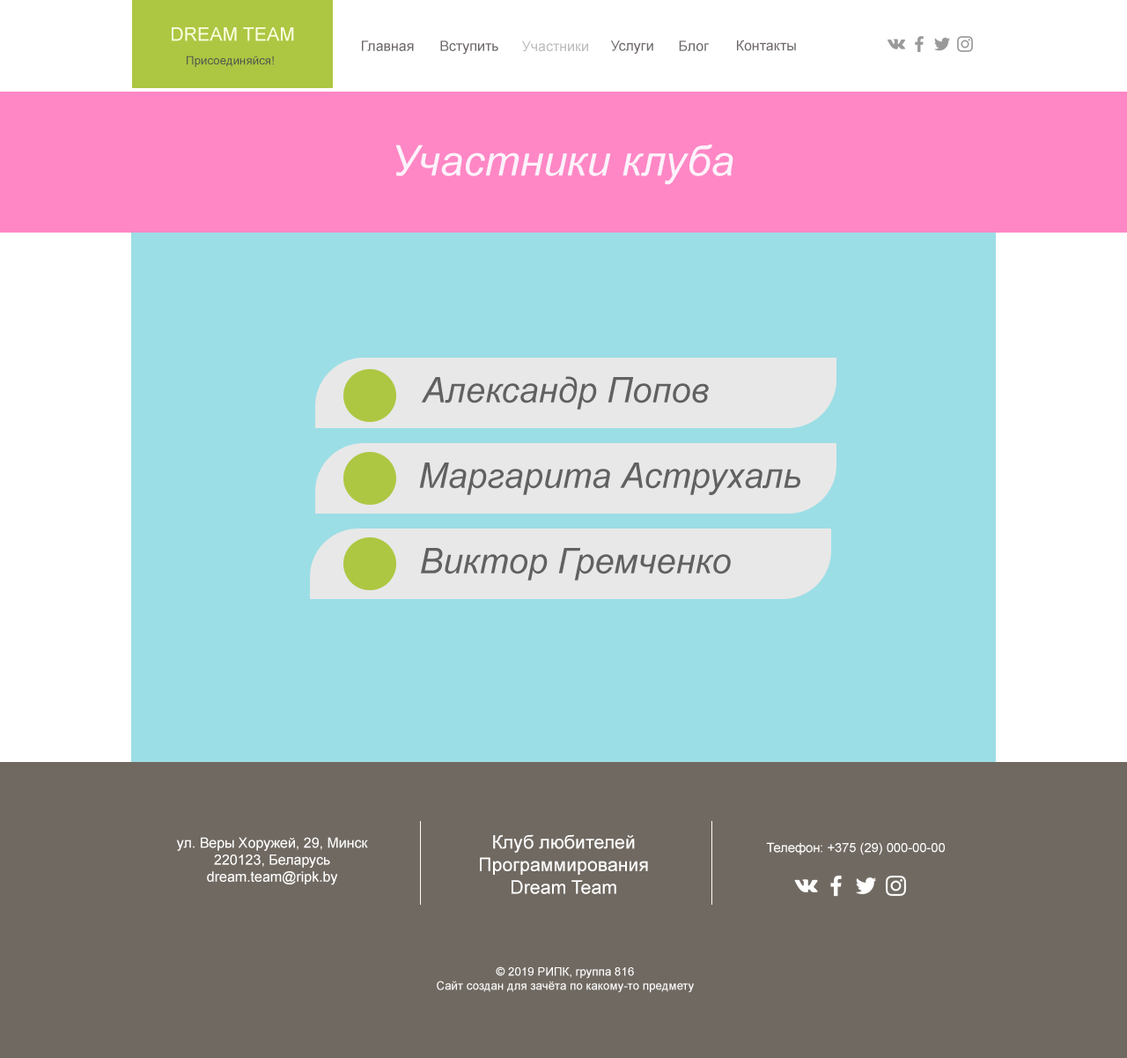
<style>
.page{position:relative;width:1127px;height:1058px;background:#9cdee6}
.page>*{position:absolute;margin:0}
.t1{font:18.8px "ArialMT";color:#fcffdf}
.t2{font:14.1px "ArialMT";color:#6d6666}
.t3{font:14.1px "ArialMT";color:#bdbdbd}
.t4{font:11.7px "ArialMT";color:#53554b}
.t5{font:42.3px "Arial-ItalicMT";color:#fdf2fb}
.t6{font:35.2px "Arial-ItalicMT";color:#616161}
.t7{font:14.1px "ArialMT";color:#ffffff}
.t8{font:18.8px "ArialMT";color:#ffffff}
.t9{font:12.9px "ArialMT";color:#ffffff}
.t10{font:11.7px "ArialMT";color:#ffffff}
</style>
<div class="page">
<p class="t1" style="left:172px;top:27px;width:122px;height:14px">DREAM TEAM</p>
<p class="t2" style="left:362px;top:41px;width:52px;height:10px">Главная</p>
<p class="t2" style="left:440px;top:41px;width:58px;height:14px">Вступить</p>
<p class="t3" style="left:522px;top:41px;width:66px;height:11px">Участники</p>
<p class="t2" style="left:611px;top:41px;width:42px;height:13px">Услуги</p>
<p class="t2" style="left:679px;top:41px;width:30px;height:10px">Блог</p>
<p class="t2" style="left:737px;top:40px;width:59px;height:11px">Контакты</p>
<p class="t4" style="left:187px;top:55px;width:87px;height:12px">Присоединяйся!</p>
<p class="t5" style="left:395px;top:144px;width:339px;height:41px">Участники клуба</p>
<p class="t6" style="left:421px;top:376px;width:288px;height:34px">Александр Попов</p>
<p class="t6" style="left:419px;top:462px;width:382px;height:33px">Маргарита Аструхаль</p>
<p class="t6" style="left:421px;top:548px;width:310px;height:32px">Виктор Гремченко</p>
<p class="t7" style="left:176px;top:837px;width:192px;height:48px;text-align:center">ул. Веры Хоружей, 29, Минск<br>220123, Беларусь<br>dream.team@ripk.by</p>
<p class="t8" style="left:480px;top:834px;width:168px;height:60px;text-align:center">Клуб любителей<br>Программирования<br>Dream Team</p>
<p class="t9" style="left:766px;top:842px;width:179px;height:13px">Телефон: +375 (29) 000-00-00</p>
<p class="t10" style="left:437px;top:966px;width:257px;height:27px;text-align:center">© 2019 РИПК, группа 816<br>Сайт создан для зачёта по какому-то предмету</p>
</div>
